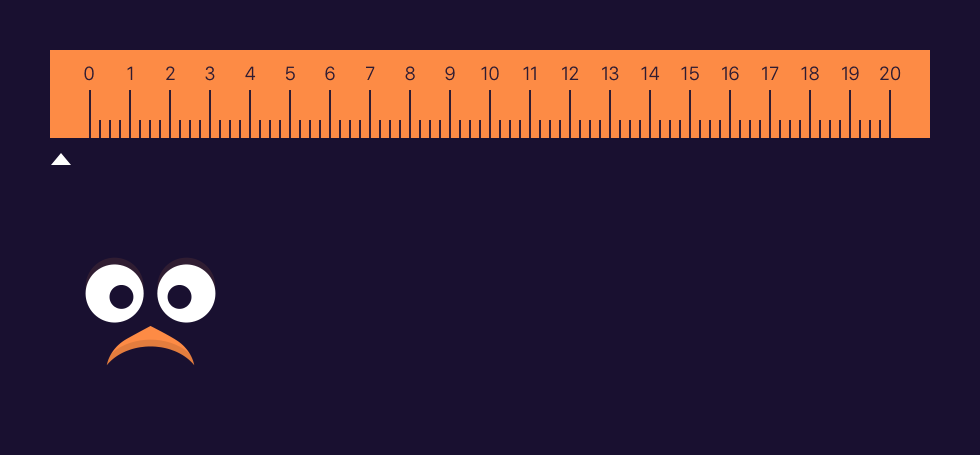
<style>
.page{position:relative;width:980px;height:455px;background:#191030}
.page>*{position:absolute;margin:0}
.t1{font:20px "SanFranciscoDisplay-Regular";color:#2f1c32}
</style>
<div class="page">
<p class="t1" style="left:84px;top:66px;width:10px;height:15px">0</p>
<p class="t1" style="left:127px;top:66px;width:6px;height:14px">1</p>
<p class="t1" style="left:166px;top:66px;width:9px;height:14px">2</p>
<p class="t1" style="left:205px;top:66px;width:10px;height:15px">3</p>
<p class="t1" style="left:245px;top:66px;width:11px;height:14px">4</p>
<p class="t1" style="left:286px;top:66px;width:9px;height:15px">5</p>
<p class="t1" style="left:325px;top:66px;width:10px;height:15px">6</p>
<p class="t1" style="left:366px;top:66px;width:9px;height:14px">7</p>
<p class="t1" style="left:405px;top:66px;width:10px;height:15px">8</p>
<p class="t1" style="left:445px;top:66px;width:10px;height:15px">9</p>
<p class="t1" style="left:481px;top:66px;width:18px;height:15px">10</p>
<p class="t1" style="left:523px;top:66px;width:13px;height:14px">11</p>
<p class="t1" style="left:562px;top:66px;width:17px;height:14px">12</p>
<p class="t1" style="left:602px;top:66px;width:17px;height:15px">13</p>
<p class="t1" style="left:641px;top:66px;width:19px;height:14px">14</p>
<p class="t1" style="left:681px;top:66px;width:18px;height:15px">15</p>
<p class="t1" style="left:722px;top:66px;width:17px;height:15px">16</p>
<p class="t1" style="left:762px;top:66px;width:17px;height:14px">17</p>
<p class="t1" style="left:801px;top:66px;width:18px;height:15px">18</p>
<p class="t1" style="left:842px;top:66px;width:17px;height:15px">19</p>
<p class="t1" style="left:880px;top:66px;width:21px;height:15px">20</p>
</div>
